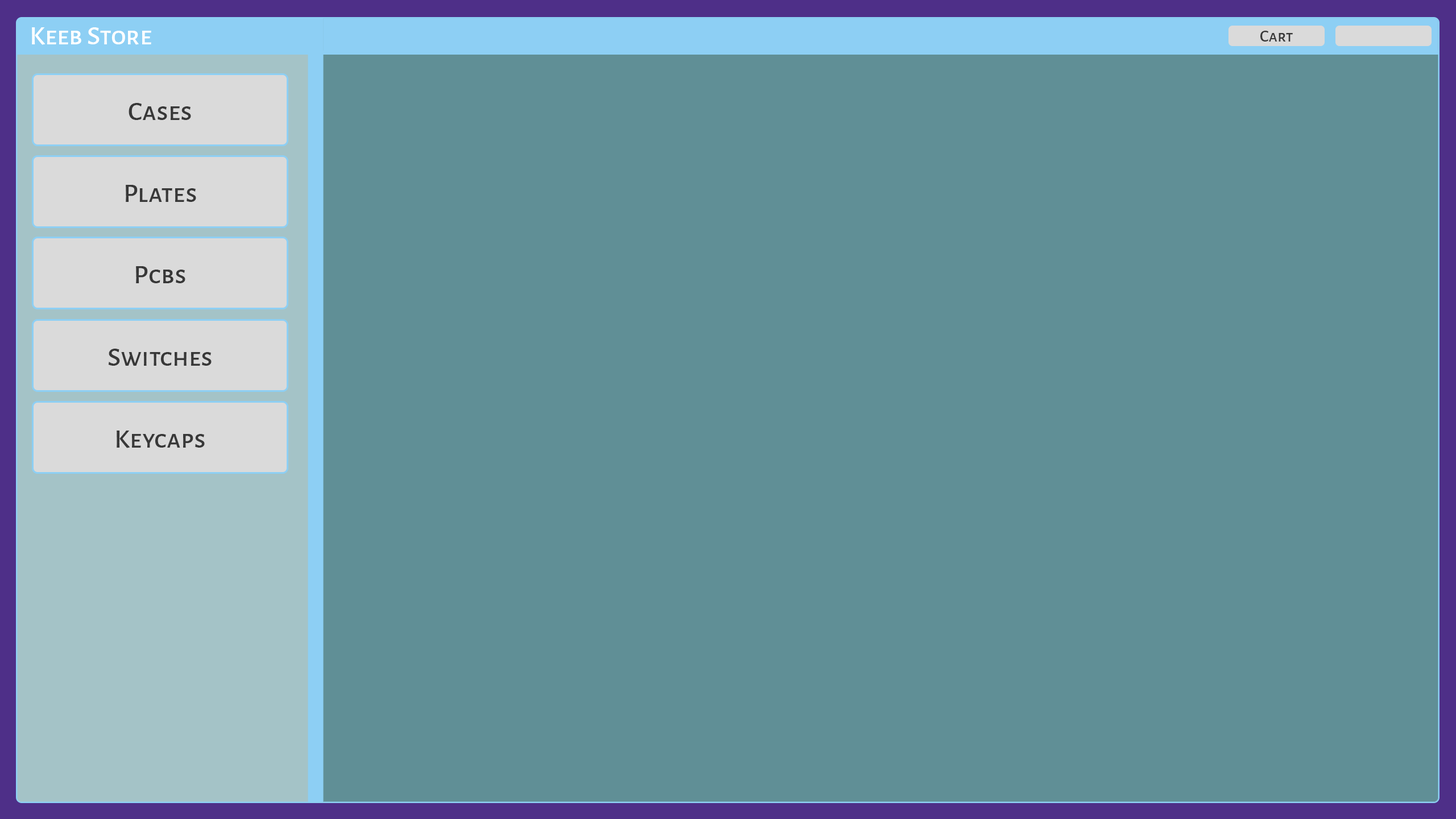
<style>
.page{position:relative;width:1456px;height:819px;background:#608f96}
.page>*{position:absolute;margin:0}
.t1{font:27.3px "AlegreyaSansSC-Medium";color:#ffffff}
.t2{font:17.1px "AlegreyaSansSC-Medium";color:#383838}
.t3{font:27.3px "AlegreyaSansSC-Medium";color:#383838}
</style>
<div class="page">
<p class="t1" style="left:32px;top:27px;width:119px;height:18px">Keeb Store</p>
<p class="t2" style="left:1260px;top:31px;width:33px;height:11px">Cart</p>
<p class="t3" style="left:129px;top:103px;width:62px;height:17px"><span class="t1"><br></span>Cases</p>
<p class="t3" style="left:126px;top:185px;width:70px;height:17px">Plates</p>
<p class="t3" style="left:136px;top:266px;width:49px;height:17px">Pcbs</p>
<p class="t3" style="left:108px;top:349px;width:104px;height:17px">Switches</p>
<p class="t3" style="left:117px;top:431px;width:88px;height:17px">Keycaps</p>
</div>
